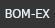
<style>
.page{position:relative;width:55px;height:28px;background:#363636}
.page>*{position:absolute;margin:0}
.t1{font:12.5px "Tahoma";color:#e9f0f5}
</style>
<div class="page">
<p class="t1" style="left:5px;top:9px;width:45px;height:9px">BOM-EX</p>
</div>
